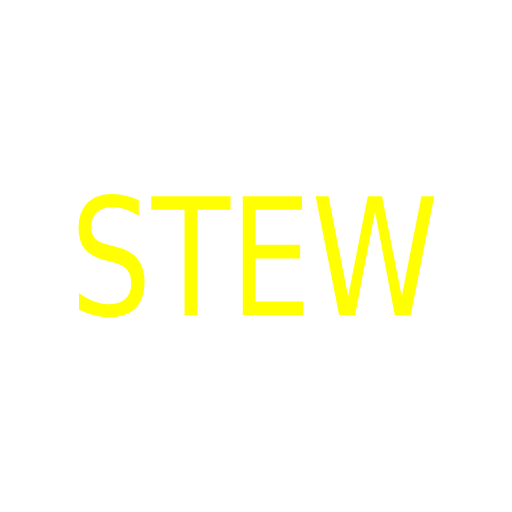
<style>
.page{position:relative;width:512px;height:512px;background:#ffffff}
.page>*{position:absolute;margin:0}
.t1{font:163px "DejaVuSans";color:#ffff00;scale:0.79 1}
</style>
<div class="page">
<p class="t1" style="left:78px;top:194px;width:357px;height:124px">STEW</p>
</div>
